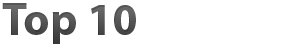
<style>
.page{position:relative;width:300px;height:47px;background:#ffffff}
.page>*{position:absolute;margin:0}
.t1{font:46px "MyriadPro-Bold";color:#464646}
</style>
<div class="page">
<p class="t1" style="left:2px;top:3px;width:134px;height:41px">Top 10</p>
</div>
